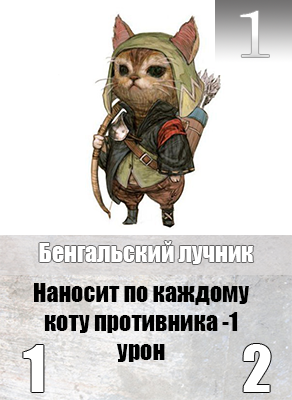
<style>
.page{position:relative;width:292px;height:400px;background:#ffffff}
.page>*{position:absolute;margin:0}
.t1{font:65.6px "Century";color:#ffffff;scale:1.18 1}
.t2{font:24px "Impact";color:#ffffff}
.t3{font:24px "Impact";color:#000000}
</style>
<div class="page">
<p class="t1" style="left:240px;top:11px;width:29px;height:46px">1</p>
<p class="t2" style="left:39px;top:241px;width:215px;height:23px">Бенгальский лучник</p>
<p class="t3" style="left:34px;top:283px;width:215px;height:79px;text-align:center">Наносит по каждому коту противника -1 урон</p>
</div>
